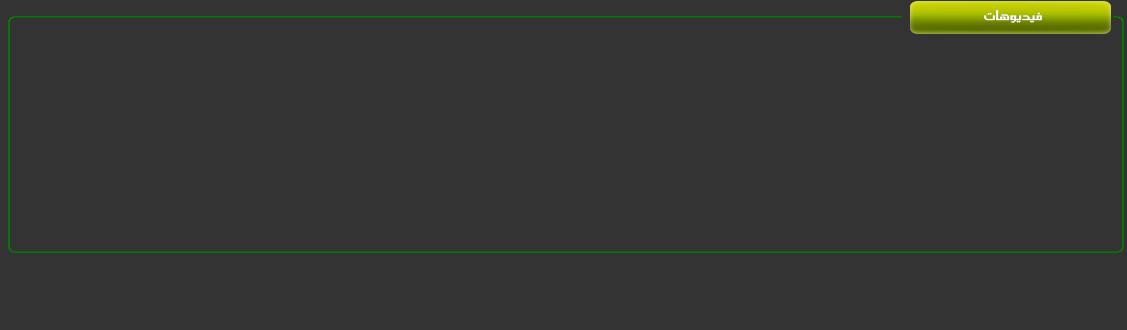
<style>
.page{position:relative;width:1127px;height:330px;background:#333333}
.page>*{position:absolute;margin:0}
.t1{font:16px "SC_KHALID";color:#fefefe;scale:1.07 1}
</style>
<div class="page">
<p class="t1" style="left:984px;top:10px;width:58px;height:13px">فيديوهات</p>
</div>
